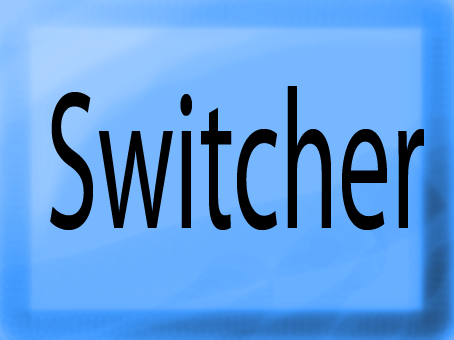
<style>
.page{position:relative;width:454px;height:340px}
.page>*{position:absolute;margin:0}
.t1{font:199.5px "MyriadPro-Regular";color:#000000;scale:0.53 1}
</style>
<div class="page">
<p class="t1" style="left:50px;top:86px;width:374px;height:145px">Switcher</p>
</div>
